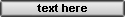
<style>
.page{position:relative;width:125px;height:17px}
.page>*{position:absolute;margin:0}
.t1{font:11px "Arial-BoldMT";color:#000000}
</style>
<div class="page">
<p class="t1" style="left:38px;top:4px;width:50px;height:15px">text here</p>
</div>
